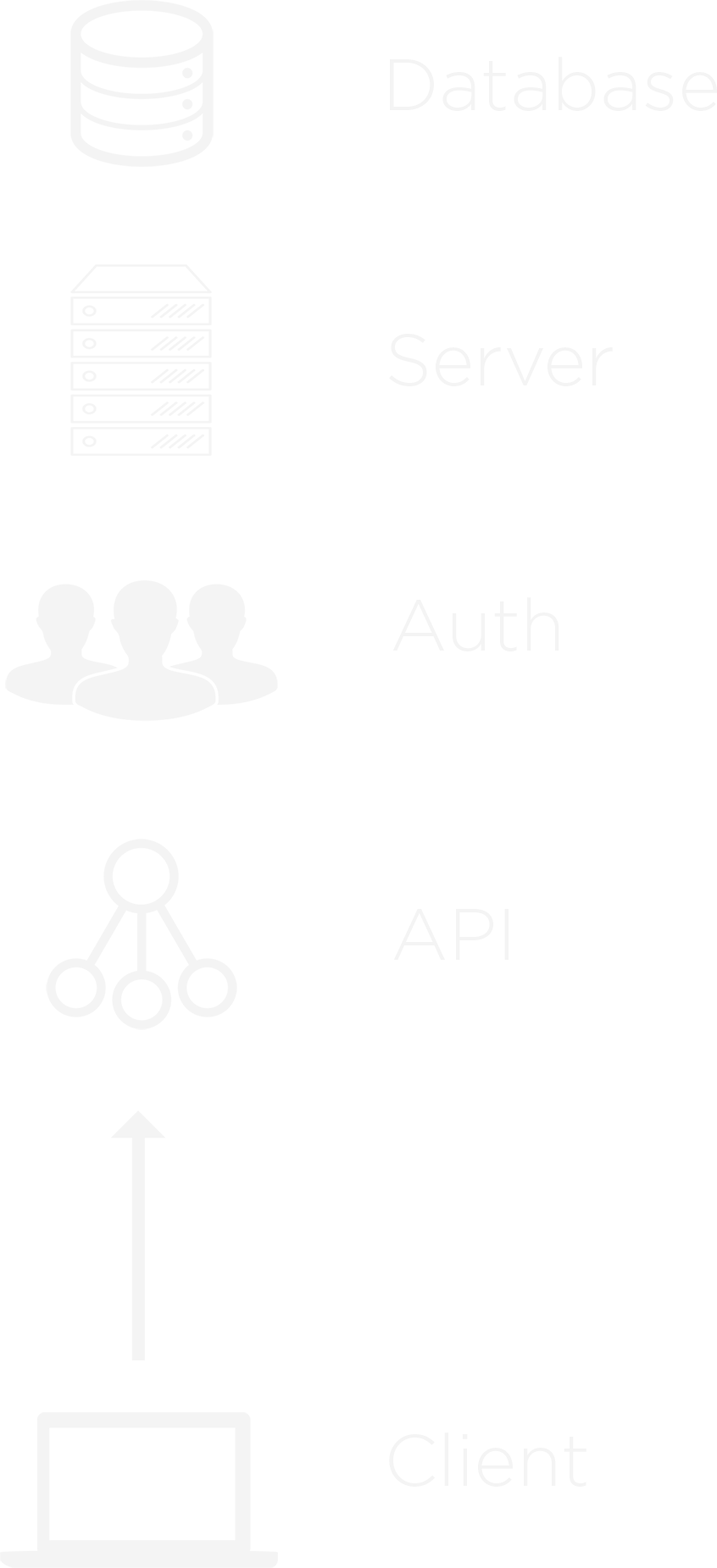
<style>
.page{position:relative;width:717px;height:1568px;background:#ffffff}
.page>*{position:absolute;margin:0}
.t1{font:72.9px "Gotham-Light";color:#f4f4f4}
</style>
<div class="page">
<p class="t1" style="left:390px;top:57px;width:327px;height:54px">Database</p>
<p class="t1" style="left:389px;top:334px;width:223px;height:52px">Server</p>
<p class="t1" style="left:392px;top:597px;width:167px;height:54px">Auth</p>
<p class="t1" style="left:393px;top:909px;width:115px;height:51px">API</p>
<p class="t1" style="left:389px;top:1432px;width:197px;height:55px">Client</p>
</div>
